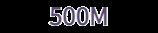
<style>
.page{position:relative;width:158px;height:33px;background:#000000}
.page>*{position:absolute;margin:0}
.t1{font:24px "WebPSD-18463539-0-Regular";color:#59496e;font-weight:bold}
</style>
<div class="page">
<p class="t1" style="left:0px;top:0px;width:158px;height:33px">500M</p>
</div>
